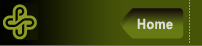
<style>
.page{position:relative;width:202px;height:46px}
.page>*{position:absolute;margin:0}
.t1{font:14px "Arial-BoldMT";letter-spacing:0.025em;color:#dcddda;scale:0.9 1}
</style>
<div class="page">
<p class="t1" style="left:137px;top:18px;width:36px;height:12px">Home</p>
</div>
